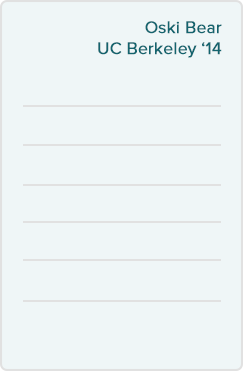
<style>
.page{position:relative;width:243px;height:371px;background:#eff6f7}
.page>*{position:absolute;margin:0}
.t1{font:17.4px/20.9px "ProximaNova-Regular";letter-spacing:-0.007em;color:#13646e;font-weight:bold}
</style>
<div class="page">
<p class="t1" style="left:98px;top:21px;width:124px;height:37px;text-align:right">Oski Bear<br>UC Berkeley ‘14</p>
</div>
